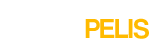
<style>
.page{position:relative;width:158px;height:55px;background:#ffffff}
.page>*{position:absolute;margin:0}
.t1{font:28px "CoolveticaRg-Regular";color:#ffba00}
</style>
<div class="page">
<p class="t1" style="left:85px;top:18px;width:64px;height:21px">PELIS</p>
</div>
